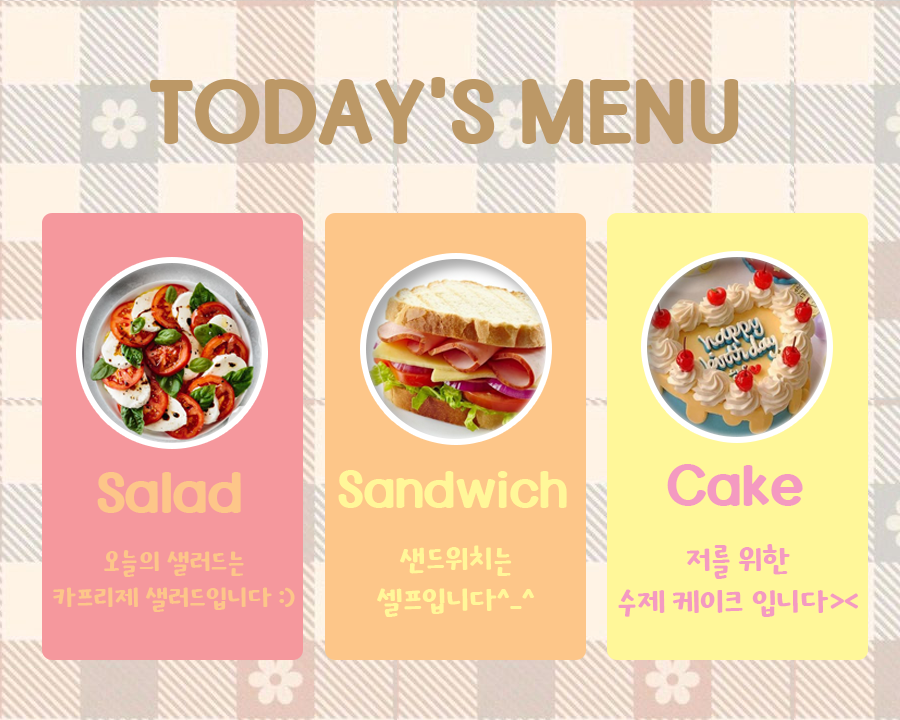
<style>
.page{position:relative;width:900px;height:720px}
.page>*{position:absolute;margin:0}
.t1{font:110.1px "KOTRA-HOPE";color:#bc9866}
.t2{font:70px "KOTRA-HOPE";color:#fdc689}
.t3{font:63px "KOTRA-HOPE";color:#fff799}
.t4{font:70px "KOTRA-HOPE";color:#f49ac1}
.t5{font:34.1px "KOTRA-HOPE";color:#fff799}
.t6{font:35px "KOTRA-HOPE";color:#f49ac1}
.t7{font:30px "KOTRA-HOPE";color:#fdc689}
</style>
<div class="page">
<p class="t1" style="left:149px;top:77px;width:590px;height:68px">TODAY’S MENU</p>
<p class="t2" style="left:97px;top:472px;width:144px;height:41px">Salad</p>
<p class="t3" style="left:338px;top:470px;width:229px;height:38px">Sandwich</p>
<p class="t4" style="left:667px;top:464px;width:136px;height:42px">Cake</p>
<p class="t5" style="left:377px;top:545px;width:158px;height:72px;text-align:center">샌드위치는<br>셀프입니다^_^</p>
<p class="t6" style="left:618px;top:544px;width:240px;height:73px;text-align:center">저를 위한<br>수제 케이크 입니다&gt;&lt;</p>
<p class="t7" style="left:53px;top:550px;width:242px;height:62px;text-align:center">오늘의 샐러드는<br>카프리제 샐러드입니다 :)</p>
</div>
